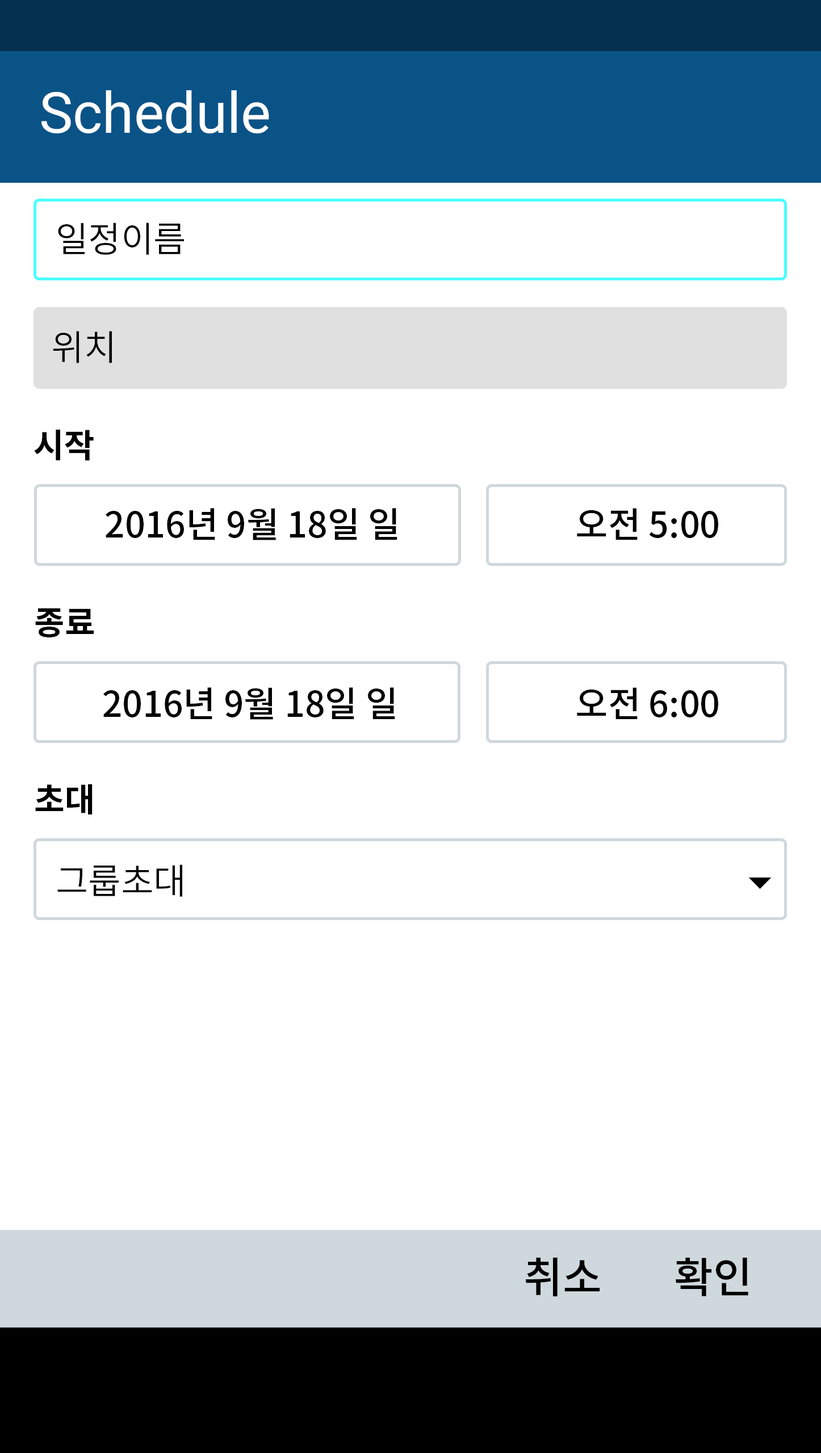
<style>
.page{position:relative;width:821px;height:1453px;background:#ffffff}
.page>*{position:absolute;margin:0}
.t1{font:56.8px "Roboto-Regular";color:#ffffff}
.t2{font:35.5px "NotoSansCJKkr-DemiLight";color:#000000}
.t3{font:33.1px "NotoSansCJKkr-Bold";color:#000000}
.t4{font:35.5px "NotoSansCJKkr-Medium";color:#000000}
.t5{font:42.6px "NotoSansCJKkr-Medium";color:#000000}
</style>
<div class="page">
<p class="t1" style="left:41px;top:90px;width:228px;height:43px">Schedule</p>
<p class="t2" style="left:58px;top:222px;width:126px;height:33px">일정이름</p>
<p class="t2" style="left:53px;top:331px;width:59px;height:32px">위치</p>
<p class="t3" style="left:34px;top:430px;width:60px;height:31px">시작</p>
<p class="t4" style="left:106px;top:508px;width:291px;height:32px">2016년 9월 18일 일</p>
<p class="t4" style="left:577px;top:508px;width:141px;height:32px">오전 5:00</p>
<p class="t3" style="left:35px;top:608px;width:59px;height:29px">종료</p>
<p class="t4" style="left:103px;top:687px;width:292px;height:33px">2016년 9월 18일 일</p>
<p class="t4" style="left:577px;top:687px;width:141px;height:32px">오전 6:00</p>
<p class="t3" style="left:35px;top:784px;width:58px;height:30px">초대</p>
<p class="t2" style="left:57px;top:864px;width:125px;height:33px">그룹초대</p>
<p class="t5" style="left:525px;top:1257px;width:75px;height:39px">취소</p>
<p class="t5" style="left:675px;top:1257px;width:73px;height:39px">확인</p>
</div>
